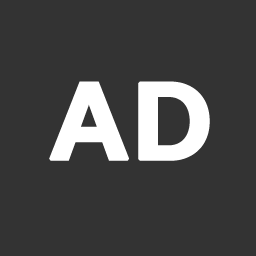
<style>
.page{position:relative;width:256px;height:256px;background:#333333}
.page>*{position:absolute;margin:0}
.t1{font:107.6px "BreezeSans-Bold";color:#ffffff;font-weight:bold;scale:1.05 1}
</style>
<div class="page">
<p class="t1" style="left:49px;top:81px;width:161px;height:80px">AD</p>
</div>
